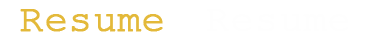
<style>
.page{position:relative;width:368px;height:43px;background:#ffffff}
.page>*{position:absolute;margin:0}
.t1{font:38.9px "CourierNewPSMT";color:#e3b93a;font-weight:bold}
</style>
<div class="page">
<p class="t1" style="left:20px;top:9px;width:143px;height:23px">Resume</p>
</div>
